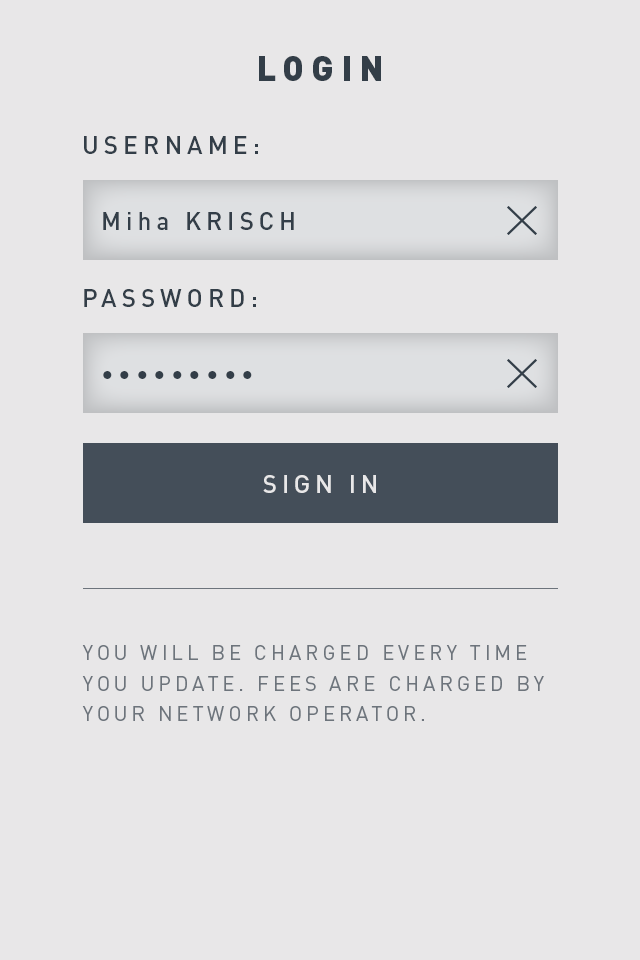
<style>
.page{position:relative;width:640px;height:960px;background:#e8e7e8}
.page>*{position:absolute;margin:0}
.t1{font:35px "DINPro-Black";letter-spacing:0.2em;color:#333e48}
.t2{font:25px "DINPro-Medium";letter-spacing:0.2em;color:#333e48}
.t3{font:25px/105.5px "DINPro-Medium";letter-spacing:0.2em;color:#333e48}
.t4{font:25.1px/105.5px "DINPro-Medium";letter-spacing:0.2em;color:#333e48}
.t5{font:25.1px/105.4px "DINPro-Medium";letter-spacing:0.2em;color:#dacebe}
.t6{font:25.2px/106.3px "DINPro-Medium";letter-spacing:0.2em;color:#e8e7e8}
.t7{font:25.3px/106.3px "DINPro-Medium";letter-spacing:0.2em;color:#e8e7e8}
.t8{font:20.3px/30.3px "DINPro";letter-spacing:0.2em;color:#6d747c}
</style>
<div class="page">
<p class="t1" style="left:259px;top:56px;width:122px;height:25px">LOGIN</p>
<p class="t2" style="left:84px;top:136px;width:174px;height:18px">USERNAME:</p>
<p class="t3" style="left:103px;top:212px;width:191px;height:18px">Miha KRISCH<br><span class="t4">ISCH</span></p>
<p class="t2" style="left:84px;top:289px;width:172px;height:18px">PASSWORD:</p>
<p class="t2" style="left:103px;top:371px;width:149px;height:8px">•••••••••<br><span class="t5">ISCH</span></p>
<p class="t6" style="left:263px;top:475px;width:113px;height:18px;text-align:center">SIGN IN<br><span class="t7">ISCH</span></p>
<p class="t8" style="left:82px;top:645px;width:462px;height:76px">YOU WILL BE CHARGED EVERY TIME YOU UPDATE. FEES ARE CHARGED BY YOUR NETWORK OPERATOR.</p>
</div>
